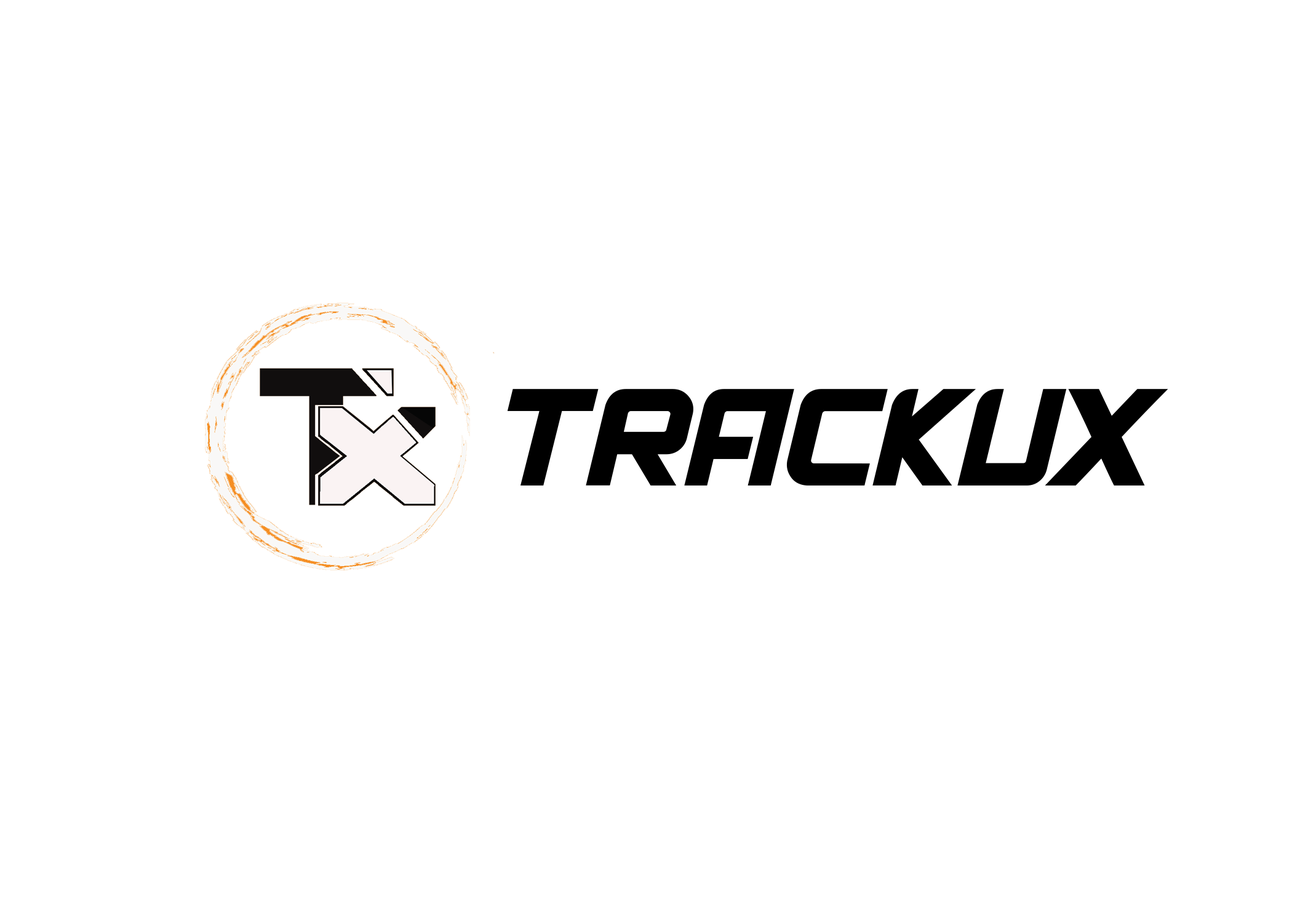
<style>
.page{position:relative;width:1292px;height:923px;background:#ffffff}
.page>*{position:absolute;margin:0}
.t1{font:146.7px "Spantaran";color:#000000}
</style>
<div class="page">
<p class="t1" style="left:507px;top:389px;width:661px;height:96px">TRACKUX</p>
</div>
